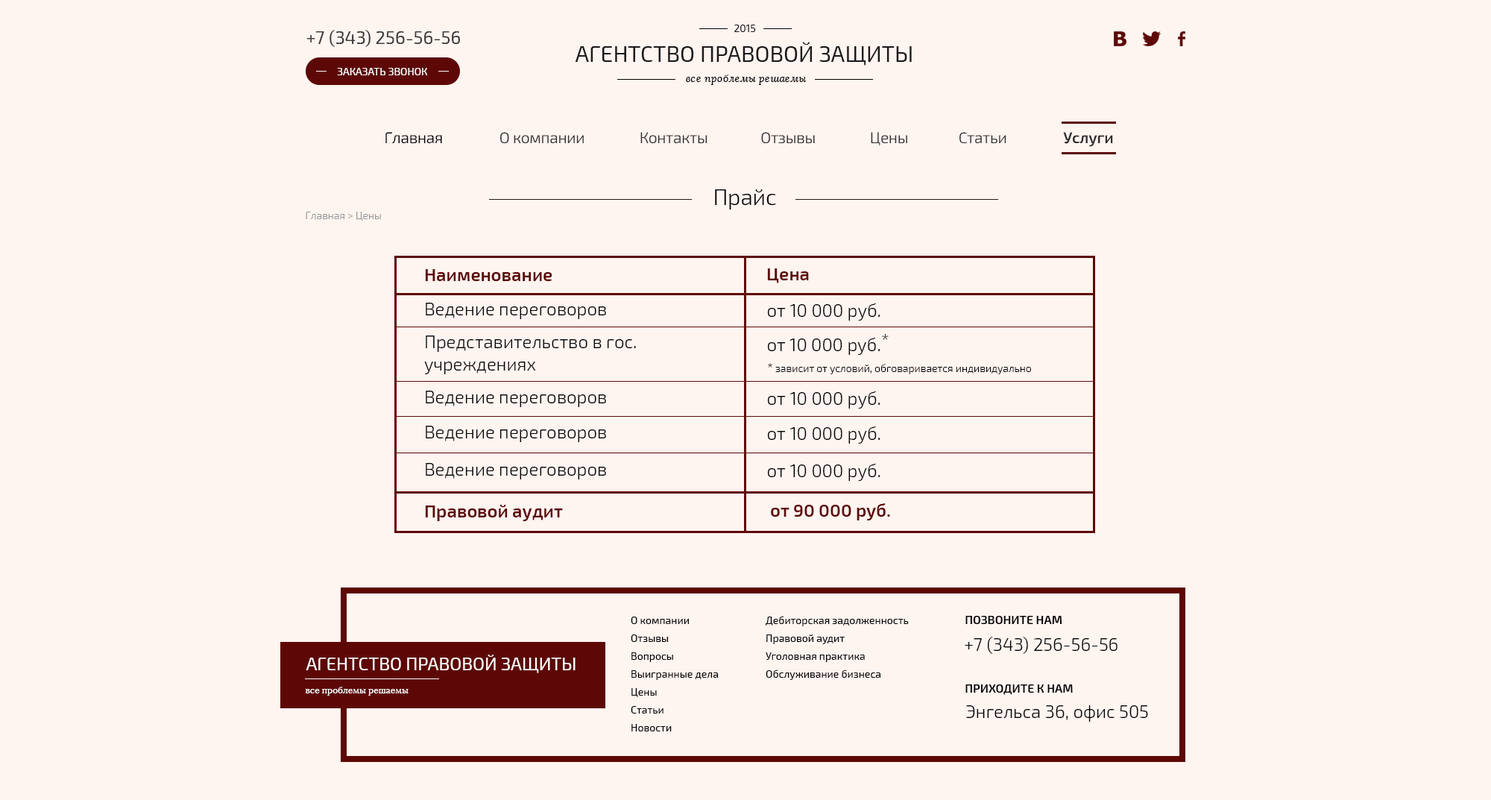
<style>
.page{position:relative;width:1491px;height:800px;background:#fef4f0}
.page>*{position:absolute;margin:0}
.t1{font:17.9px "Exo2-Regular";color:#3a3a3a}
.t2{font:10.4px "Exo2-Regular";color:#1a1a1a;text-transform:uppercase}
.t3{font:22.4px "Exo2-Regular";color:#1a1a1a;text-transform:uppercase}
.t4{font:10.4px "Exo2-Regular";color:#ffffff;text-transform:uppercase}
.t5{font:10.4px "Lora-Italic";color:#000000}
.t6{font:14.9px "Exo2-Light";color:#000000}
.t7{font:14.9px "Exo2-Light";color:#2f2f2f}
.t8{font:14.9px "Exo2-SemiBold";color:#2f2f2f}
.t9{font:22.3px "Exo2-Light";color:#000000}
.t10{font:10.4px "Exo2-Light";color:#979797}
.t11{font:17.9px "Exo2-SemiBold";color:#5d0806}
.t12{font:17.9px "Exo2-Light";color:#010101}
.t13{font:17.9px "Exo2-Light";color:#000000}
.t14{font:17.9px/22.4px "Exo2-Light";color:#010101}
.t15{font:17.9px "Exo2-Light"}
.t16{font:13.4px "Exo2-Light"}
.t17{font:10.4px "Exo2-Light";color:#000000}
.t18{font:10.4px/17.9px "Exo2-Regular";color:#000000}
.t19{font:11.9px "Exo2-SemiBold";color:#000000;text-transform:uppercase}
.t20{font:17.9px "Exo2-Regular";color:#ffffff;text-transform:uppercase}
.t21{font:8.9px "Lora-Regular";color:#ffffff}
</style>
<div class="page">
<p class="t1" style="left:306px;top:30px;width:154px;height:17px">+7 (343) 256-56-56</p>
<p class="t2" style="left:734px;top:25px;width:22px;height:7px">2015</p>
<p class="t3" style="left:575px;top:42px;width:337px;height:24px">Агентство правовой защиты</p>
<p class="t4" style="left:337px;top:68px;width:91px;height:7px">Заказать звонок</p>
<p class="t5" style="left:686px;top:75px;width:121px;height:10px">все проблемы решаемы</p>
<p class="t6" style="left:385px;top:132px;width:57px;height:11px">Главная</p>
<p class="t7" style="left:500px;top:132px;width:84px;height:11px">О компании</p>
<p class="t7" style="left:640px;top:132px;width:67px;height:11px">Контакты</p>
<p class="t7" style="left:761px;top:132px;width:54px;height:11px">Отзывы</p>
<p class="t7" style="left:871px;top:132px;width:36px;height:13px">Цены</p>
<p class="t7" style="left:959px;top:132px;width:47px;height:11px">Статьи</p>
<p class="t8" style="left:1063px;top:132px;width:50px;height:15px">Услуги</p>
<p class="t9" style="left:715px;top:189px;width:61px;height:20px">Прайс</p>
<p class="t10" style="left:306px;top:212px;width:75px;height:9px">Главная &gt; Цены</p>
<p class="t11" style="left:425px;top:269px;width:127px;height:12px">Наименование</p>
<p class="t11" style="left:767px;top:268px;width:42px;height:15px">Цена</p>
<p class="t12" style="left:426px;top:303px;width:180px;height:16px">Ведение переговоров</p>
<p class="t13" style="left:767px;top:303px;width:113px;height:18px">от 10 000 руб.</p>
<p class="t14" style="left:424px;top:335px;width:212px;height:39px">Представительство в гос.<br>учреждениях</p>
<p class="t13" style="left:767px;top:337px;width:113px;height:18px">от 10 000 руб.</p>
<p class="t15" style="left:882px;top:334px;width:7px;height:6px">*</p>
<p class="t16" style="left:768px;top:363px;width:5px;height:4px">*</p>
<p class="t17" style="left:775px;top:364px;width:256px;height:10px">зависит от условий, обговаривается индивидуально</p>
<p class="t12" style="left:426px;top:391px;width:180px;height:16px">Ведение переговоров</p>
<p class="t13" style="left:767px;top:391px;width:113px;height:17px">от 10 000 руб.</p>
<p class="t12" style="left:426px;top:426px;width:180px;height:16px">Ведение переговоров</p>
<p class="t13" style="left:767px;top:426px;width:113px;height:18px">от 10 000 руб.</p>
<p class="t12" style="left:426px;top:463px;width:180px;height:16px">Ведение переговоров</p>
<p class="t13" style="left:767px;top:463px;width:113px;height:18px">от 10 000 руб.</p>
<p class="t11" style="left:425px;top:505px;width:138px;height:16px">Правовой аудит</p>
<p class="t11" style="left:771px;top:502px;width:119px;height:18px">от 90 000 руб.</p>
<p class="t18" style="left:631px;top:616px;width:87px;height:115px">О компании<br>Отзывы<br>Вопросы<br>Выигранные дела<br>Цены<br>Статьи<br>Новости</p>
<p class="t18" style="left:766px;top:616px;width:143px;height:64px">Дебиторская задолженность<br>Правовой аудит<br>Уголовная практика<br>Обслуживание бизнеса</p>
<p class="t19" style="left:965px;top:616px;width:97px;height:8px">Позвоните нам</p>
<p class="t13" style="left:965px;top:637px;width:152px;height:17px">+7 (343) 256-56-56</p>
<p class="t20" style="left:306px;top:654px;width:269px;height:19px">Агентство правовой защиты</p>
<p class="t21" style="left:305px;top:687px;width:103px;height:8px">все проблемы решаемы</p>
<p class="t19" style="left:965px;top:684px;width:108px;height:11px">приходите к нам</p>
<p class="t13" style="left:966px;top:705px;width:182px;height:17px">Энгельса 36, офис 505</p>
</div>
